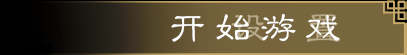
<style>
.page{position:relative;width:407px;height:55px;background:#78663d}
.page>*{position:absolute;margin:0}
.t1{font:37.5px "FZLBJW--GB1-0";letter-spacing:0.2em;color:#ffffff}
.t2{font:37.5px "FZLBJW--GB1-0";letter-spacing:1em}
</style>
<div class="page">
<p class="t1" style="left:171px;top:14px;width:169px;height:28px">开始游戏</p>
<p class="t2" style="left:231px;top:14px;width:109px;height:28px">设置</p>
</div>
